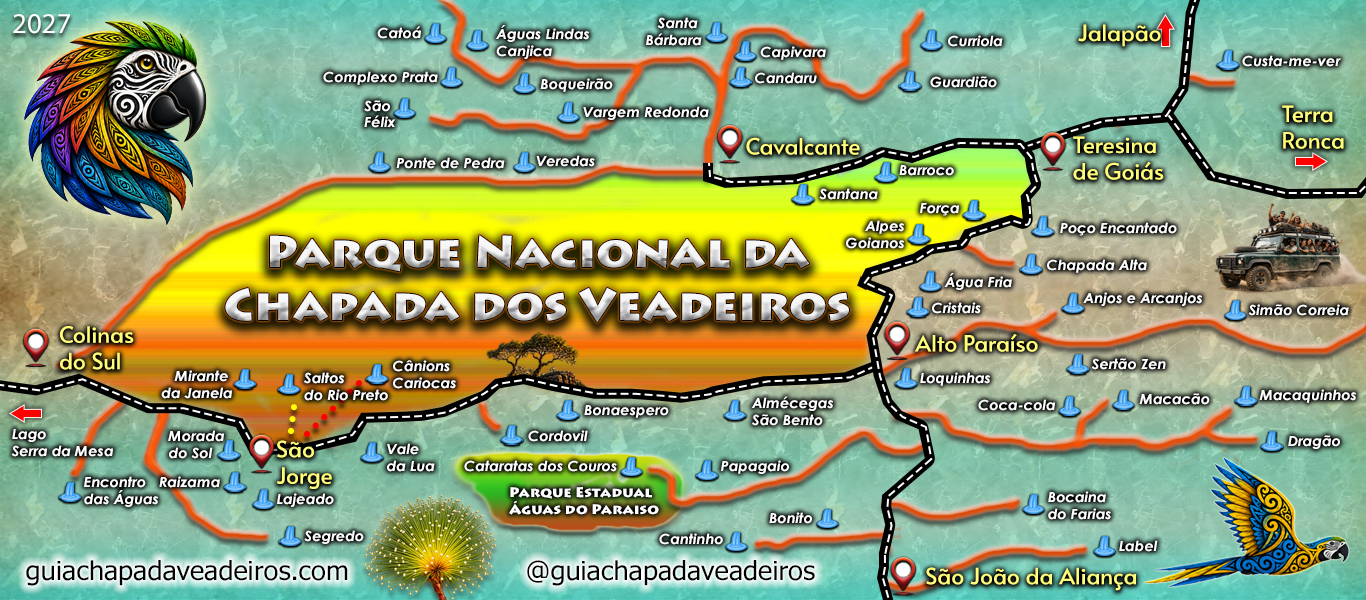
<style>
.page{position:relative;width:1366px;height:600px}
.page>*{position:absolute;margin:0}
.t1{font:28.8px "MyriadPro-Regular";color:#ffffff}
.t2{font:14px "CenturyGothic-BoldItalic";color:#ffffff;scale:1.04 1}
.t3{font:22px "Alata-Regular";color:#fffd7a;scale:1.04 1}
.t4{font:44px "LithosPro-Black";scale:1.04 1}
.t5{font:14px "LithosPro-Black";color:#ffffff;scale:1.04 1}
.t6{font:26px "Tahoma";color:#000000;scale:1.04 1}
.t7{font:22px "Alata-Regular";color:#fffd7b;scale:1.04 1}
</style>
<div class="page">
<p class="t1" style="left:13px;top:14px;width:57px;height:20px">2027</p>
<p class="t2" style="left:646px;top:17px;width:56px;height:29px;text-align:right">Santa <br>Bárbara</p>
<p class="t2" style="left:377px;top:26px;width:44px;height:13px">Catoá</p>
<p class="t2" style="left:496px;top:25px;width:93px;height:34px">Águas Lindas <br>Canjica</p>
<p class="t3" style="left:1078px;top:24px;width:83px;height:23px">Jalapão</p>
<p class="t2" style="left:948px;top:35px;width:55px;height:12px">Curriola</p>
<p class="t2" style="left:760px;top:46px;width:66px;height:14px">Capivara</p>
<p class="t2" style="left:1242px;top:55px;width:99px;height:12px">Custa-me-ver</p>
<p class="t2" style="left:323px;top:71px;width:115px;height:14px">Complexo Prata</p>
<p class="t2" style="left:540px;top:78px;width:73px;height:14px">Boqueirão</p>
<p class="t2" style="left:755px;top:72px;width:62px;height:12px">Candaru</p>
<p class="t2" style="left:930px;top:76px;width:67px;height:12px">Guardião</p>
<p class="t2" style="left:364px;top:100px;width:32px;height:28px">São<br>Félix</p>
<p class="t2" style="left:583px;top:106px;width:126px;height:14px">Vargem Redonda</p>
<p class="t3" style="left:1282px;top:105px;width:62px;height:44px">Terra <br>Ronca</p>
<p class="t3" style="left:746px;top:137px;width:114px;height:18px">Cavalcante</p>
<p class="t3" style="left:1073px;top:136px;width:91px;height:44px">Teresina <br>de Goiás</p>
<p class="t2" style="left:396px;top:157px;width:109px;height:12px">Ponte de Pedra</p>
<p class="t2" style="left:536px;top:155px;width:59px;height:12px">Veredas</p>
<p class="t2" style="left:899px;top:165px;width:55px;height:11px">Barroco</p>
<p class="t2" style="left:819px;top:188px;width:59px;height:12px">Santana</p>
<p class="t2" style="left:920px;top:203px;width:39px;height:13px">Força</p>
<p class="t2" style="left:846px;top:220px;width:58px;height:29px;text-align:right">Alpes<br>Goianos</p>
<p class="t2" style="left:1060px;top:222px;width:117px;height:14px">Poço Encantado</p>
<p class="t4" style="left:225px;top:235px;width:624px;height:87px;text-align:center">Parque Nacional da<br>Chapada dos Veadeiros</p>
<p class="t2" style="left:1047px;top:259px;width:100px;height:14px">Chapada Alta</p>
<p class="t2" style="left:944px;top:273px;width:68px;height:17px">Água Fria</p>
<p class="t2" style="left:1083px;top:292px;width:119px;height:14px">Anjos e Arcanjos</p>
<p class="t2" style="left:932px;top:302px;width:49px;height:12px">Cristais</p>
<p class="t2" style="left:1248px;top:304px;width:101px;height:12px">Simão Correia</p>
<p class="t3" style="left:60px;top:326px;width:74px;height:44px">Colinas<br>do Sul</p>
<p class="t3" style="left:915px;top:333px;width:123px;height:19px">Alto Paraíso</p>
<p class="t2" style="left:393px;top:360px;width:63px;height:29px">Cânions<br>Cariocas</p>
<p class="t2" style="left:1091px;top:358px;width:75px;height:12px">Sertão Zen</p>
<p class="t2" style="left:161px;top:370px;width:71px;height:29px;text-align:right">Mirante <br>da Janela</p>
<p class="t2" style="left:304px;top:372px;width:84px;height:29px">Saltos <br>do Rio Preto</p>
<p class="t2" style="left:920px;top:372px;width:70px;height:14px">Loquinhas</p>
<p class="t2" style="left:1259px;top:389px;width:97px;height:14px">Macaquinhos</p>
<p class="t2" style="left:751px;top:396px;width:82px;height:30px">Almécegas<br>São Bento</p>
<p class="t2" style="left:978px;top:399px;width:77px;height:12px">Coca-cola</p>
<p class="t2" style="left:1139px;top:393px;width:71px;height:12px">Macacão</p>
<p class="t2" style="left:584px;top:405px;width:85px;height:13px">Bonaespero</p>
<p class="t2" style="left:11px;top:429px;width:102px;height:28px">Lago <br>Serra da Mesa</p>
<p class="t2" style="left:168px;top:430px;width:56px;height:29px">Morada <br>do Sol</p>
<p class="t2" style="left:528px;top:430px;width:60px;height:12px">Cordovil</p>
<p class="t2" style="left:1288px;top:435px;width:52px;height:14px">Dragão</p>
<p class="t3" style="left:276px;top:440px;width:56px;height:49px">São <br>Jorge</p>
<p class="t2" style="left:387px;top:443px;width:48px;height:29px">Vale<br>da Lua</p>
<p class="t2" style="left:464px;top:460px;width:153px;height:12px">Cataratas dos Couros</p>
<p class="t2" style="left:721px;top:460px;width:68px;height:14px">Papagaio</p>
<p class="t2" style="left:84px;top:476px;width:74px;height:31px">Encontro<br>das Águas</p>
<p class="t2" style="left:159px;top:476px;width:61px;height:12px">Raizama</p>
<p class="t2" style="left:277px;top:493px;width:57px;height:14px">Lajeado</p>
<p class="t5" style="left:509px;top:487px;width:150px;height:28px">Parque Estadual<br>Águas do Paraiso</p>
<p class="t2" style="left:1048px;top:491px;width:63px;height:29px">Bocaina <br>do Farias</p>
<p class="t2" style="left:769px;top:512px;width:43px;height:12px">Bonito</p>
<p class="t2" style="left:304px;top:530px;width:60px;height:14px">Segredo</p>
<p class="t2" style="left:659px;top:533px;width:64px;height:12px">Cantinho</p>
<p class="t2" style="left:1119px;top:540px;width:39px;height:12px">Label</p>
<p class="t6" style="left:26px;top:560px;width:322px;height:26px">guiachapadaveadeiros.com</p>
<p class="t6" style="left:527px;top:560px;width:288px;height:26px">@guiachapadaveadeiros</p>
<p class="t7" style="left:926px;top:567px;width:210px;height:24px">São João da Aliança</p>
</div>
